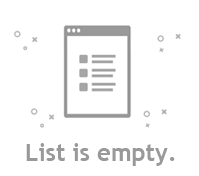
<style>
.page{position:relative;width:199px;height:176px;background:#ffffff}
.page>*{position:absolute;margin:0}
.t1{font:24px "TrebuchetMS-Bold";color:#999999}
</style>
<div class="page">
<p class="t1" style="left:26px;top:143px;width:149px;height:23px">List is empty.</p>
</div>
